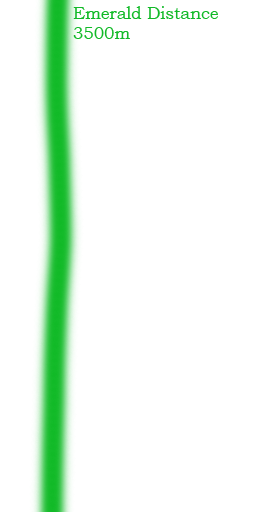
<style>
.page{position:relative;width:256px;height:512px;background:#ffffff}
.page>*{position:absolute;margin:0}
.t1{font:16.7px "BookmanOldStyle";color:#12ba28}
</style>
<div class="page">
<p class="t1" style="left:73px;top:6px;width:145px;height:33px">Emerald Distance<br>3500m</p>
</div>
